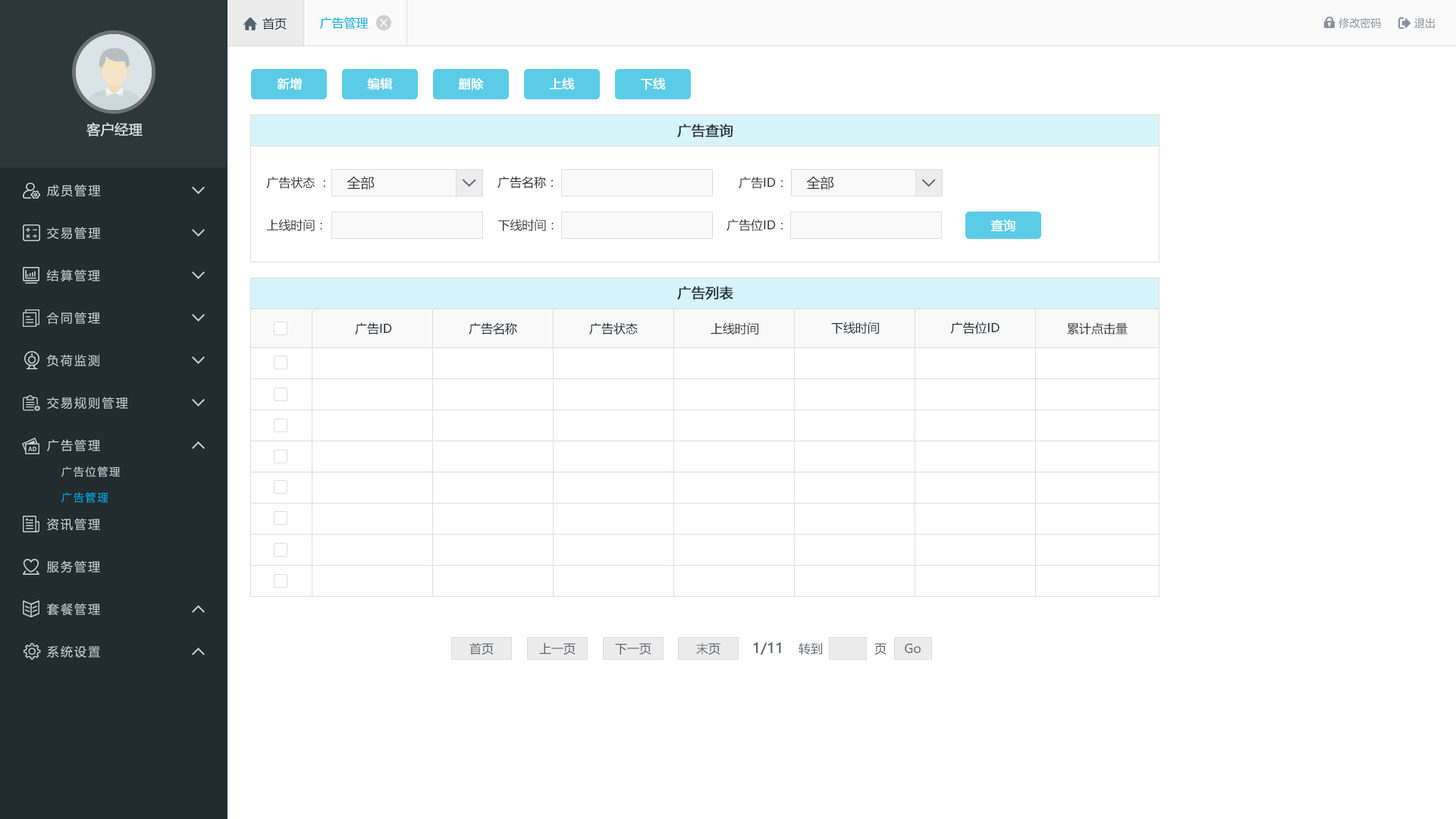
<style>
.page{position:relative;width:1456px;height:819px;background:#ffffff}
.page>*{position:absolute;margin:0}
.t1{font:12.1px "MicrosoftYaHei";color:#242e3b}
.t2{font:12.1px "MicrosoftYaHei";color:#00ace2}
.t3{font:10.6px "MicrosoftYaHei";color:#8a8f99}
.t4{font:12.1px "MicrosoftYaHei";color:#ffffff;font-weight:bold}
.t5{font:13.6px "MicrosoftYaHei";color:#d1dce2;font-weight:bold}
.t6{font:13.6px "MicrosoftYaHei";color:#242e3b;font-weight:bold}
.t7{font:12.1px "MicrosoftYaHei";letter-spacing:0.14em;color:#c2cdd2}
.t8{font:12.1px "MicrosoftYaHei";color:#333333}
.t9{font:13.6px "MicrosoftYaHei";color:#333333}
.t10{font:10.6px "MicrosoftYaHei";letter-spacing:0.14em;color:#c2cdd2}
.t11{font:10.6px "MicrosoftYaHei";letter-spacing:0.14em;color:#00ace2}
.t12{font:12.1px "MicrosoftYaHei";color:#61656b}
.t13{font:13.6px "MicrosoftYaHei";color:#61656b;font-weight:bold}
</style>
<div class="page">
<p class="t1" style="left:262px;top:17px;width:25px;height:13px">首页</p>
<p class="t2" style="left:319px;top:17px;width:50px;height:12px">广告管理</p>
<p class="t3" style="left:1338px;top:17px;width:43px;height:12px">修改密码</p>
<p class="t3" style="left:1414px;top:17px;width:21px;height:11px">退出</p>
<p class="t4" style="left:277px;top:77px;width:25px;height:13px">新增</p>
<p class="t4" style="left:367px;top:77px;width:26px;height:13px">编辑</p>
<p class="t4" style="left:458px;top:77px;width:26px;height:13px">删除</p>
<p class="t4" style="left:550px;top:77px;width:25px;height:13px">上线</p>
<p class="t4" style="left:641px;top:77px;width:25px;height:13px">下线</p>
<p class="t5" style="left:86px;top:122px;width:57px;height:14px">客户经理</p>
<p class="t6" style="left:677px;top:124px;width:56px;height:13px">广告查询</p>
<p class="t7" style="left:47px;top:184px;width:54px;height:13px">成员管理</p>
<p class="t8" style="left:266px;top:177px;width:59px;height:12px">广告状态 ：</p>
<p class="t9" style="left:347px;top:176px;width:28px;height:14px">全部</p>
<p class="t8" style="left:497px;top:176px;width:56px;height:13px">广告名称：</p>
<p class="t8" style="left:739px;top:177px;width:44px;height:12px">广告ID：</p>
<p class="t9" style="left:806px;top:176px;width:28px;height:14px">全部</p>
<p class="t8" style="left:267px;top:219px;width:55px;height:12px">上线时间：</p>
<p class="t8" style="left:498px;top:219px;width:56px;height:12px">下线时间：</p>
<p class="t8" style="left:726px;top:219px;width:57px;height:12px">广告位ID：</p>
<p class="t4" style="left:990px;top:219px;width:25px;height:12px">查询</p>
<p class="t7" style="left:47px;top:227px;width:54px;height:13px">交易管理</p>
<p class="t7" style="left:46px;top:269px;width:54px;height:13px">结算管理</p>
<p class="t6" style="left:677px;top:286px;width:56px;height:14px">广告列表</p>
<p class="t7" style="left:46px;top:312px;width:54px;height:13px">合同管理</p>
<p class="t1" style="left:355px;top:322px;width:37px;height:12px">广告ID</p>
<p class="t1" style="left:469px;top:322px;width:48px;height:13px">广告名称</p>
<p class="t1" style="left:589px;top:322px;width:49px;height:12px">广告状态</p>
<p class="t8" style="left:711px;top:322px;width:47px;height:12px">上线时间</p>
<p class="t1" style="left:831px;top:322px;width:48px;height:12px">下线时间</p>
<p class="t1" style="left:950px;top:322px;width:49px;height:12px">广告位ID</p>
<p class="t8" style="left:1067px;top:322px;width:61px;height:12px">累计点击量</p>
<p class="t7" style="left:46px;top:354px;width:53px;height:13px">负荷监测</p>
<p class="t7" style="left:47px;top:397px;width:81px;height:12px">交易规则管理</p>
<p class="t7" style="left:47px;top:439px;width:53px;height:12px">广告管理</p>
<p class="t10" style="left:61px;top:466px;width:59px;height:11px">广告位管理</p>
<p class="t11" style="left:61px;top:492px;width:47px;height:11px">广告管理</p>
<p class="t7" style="left:47px;top:518px;width:53px;height:13px">资讯管理</p>
<p class="t7" style="left:47px;top:560px;width:53px;height:13px">服务管理</p>
<p class="t7" style="left:47px;top:603px;width:53px;height:13px">套餐管理</p>
<p class="t7" style="left:47px;top:645px;width:53px;height:13px">系统设置</p>
<p class="t12" style="left:469px;top:642px;width:25px;height:13px">首页</p>
<p class="t12" style="left:539px;top:643px;width:37px;height:12px">上一页</p>
<p class="t12" style="left:615px;top:643px;width:36px;height:12px">下一页</p>
<p class="t12" style="left:696px;top:642px;width:24px;height:13px">末页</p>
<p class="t13" style="left:753px;top:642px;width:28px;height:13px">1/11</p>
<p class="t12" style="left:799px;top:642px;width:23px;height:12px">转到</p>
<p class="t12" style="left:874px;top:643px;width:12px;height:12px">页</p>
<p class="t12" style="left:905px;top:643px;width:16px;height:11px">Go</p>
</div>
